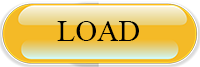
<style>
.page{position:relative;width:200px;height:67px}
.page>*{position:absolute;margin:0}
.t1{font:30px "TimesNewRomanPSMT";color:#000000}
</style>
<div class="page">
<p class="t1" style="left:57px;top:21px;width:82px;height:20px">LOAD</p>
</div>
